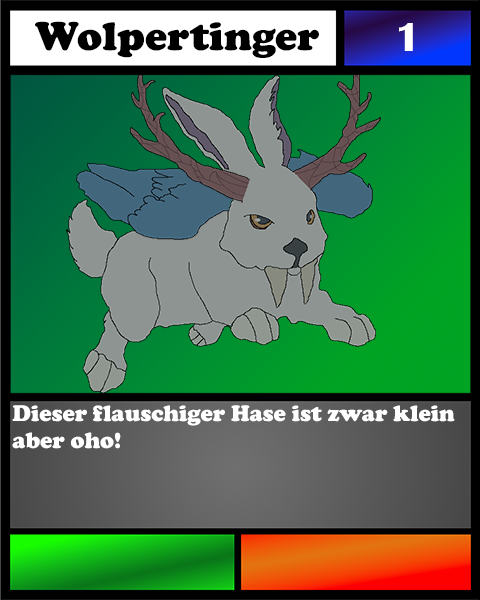
<style>
.page{position:relative;width:480px;height:600px}
.page>*{position:absolute;margin:0}
.t1{font:41.7px "CooperBlack";color:#000000}
.t2{font:41.7px "Bauhaus93";color:#42667c}
.t3{font:41.7px "BritannicBold";color:#ffffff}
.t4{font:23.1px "CooperBlack";color:#ffffff}
</style>
<div class="page">
<p class="t1" style="left:35px;top:21px;width:284px;height:37px;text-align:center">Wolpertinger<br><span class="t2"><br><br>dwadwawda</span></p>
<p class="t3" style="left:399px;top:23px;width:14px;height:28px">1</p>
<p class="t4" style="left:12px;top:405px;width:443px;height:44px">Dieser flauschiger Hase ist zwar klein<br>aber oho!</p>
</div>
